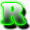
<style>
.page{position:relative;width:30px;height:30px}
.page>*{position:absolute;margin:0}
.t1{font:30px "CooperBlackStd";letter-spacing:0.125em}
</style>
<div class="page">
<p class="t1" style="left:1px;top:3px;width:25px;height:22px">R</p>
</div>
